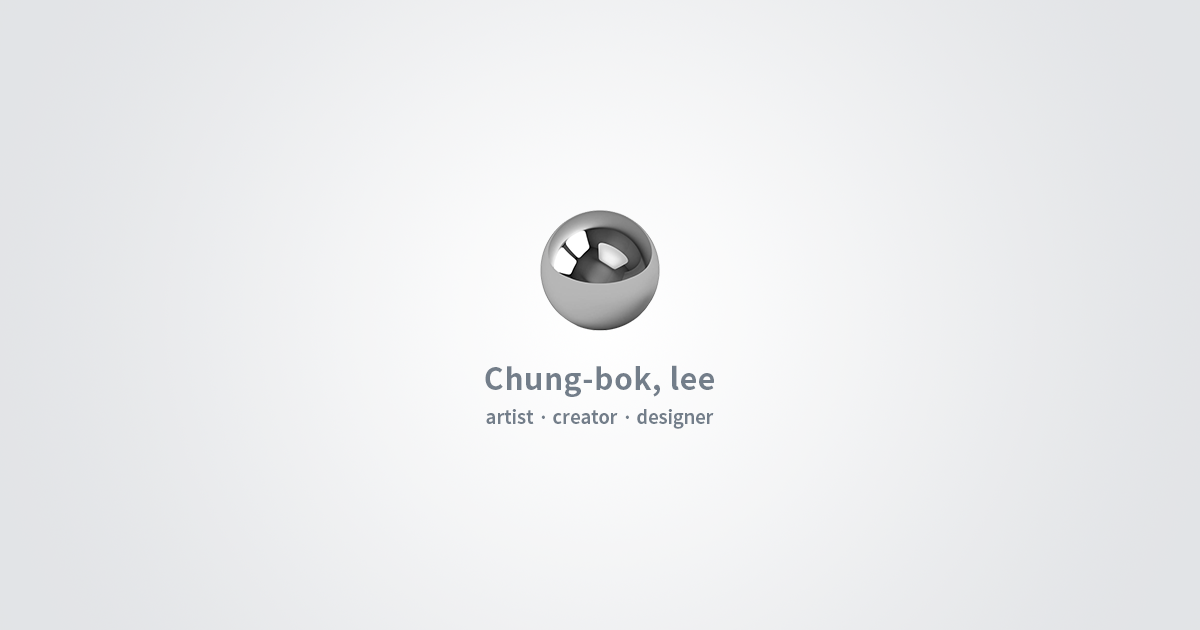
<style>
.page{position:relative;width:1200px;height:630px}
.page>*{position:absolute;margin:0}
.t1{font:18px/45px "NotoSansCJKkr-Bold";color:#737e8a}
.t2{font:30px/45px "NotoSansCJKkr-Bold";letter-spacing:0.02em;color:#737e8a}
</style>
<div class="page">
<p class="t1" style="left:485px;top:365px;width:229px;height:64px;text-align:center"><span class="t2">Chung-bok, lee<br></span>artist · creator · designer</p>
</div>
